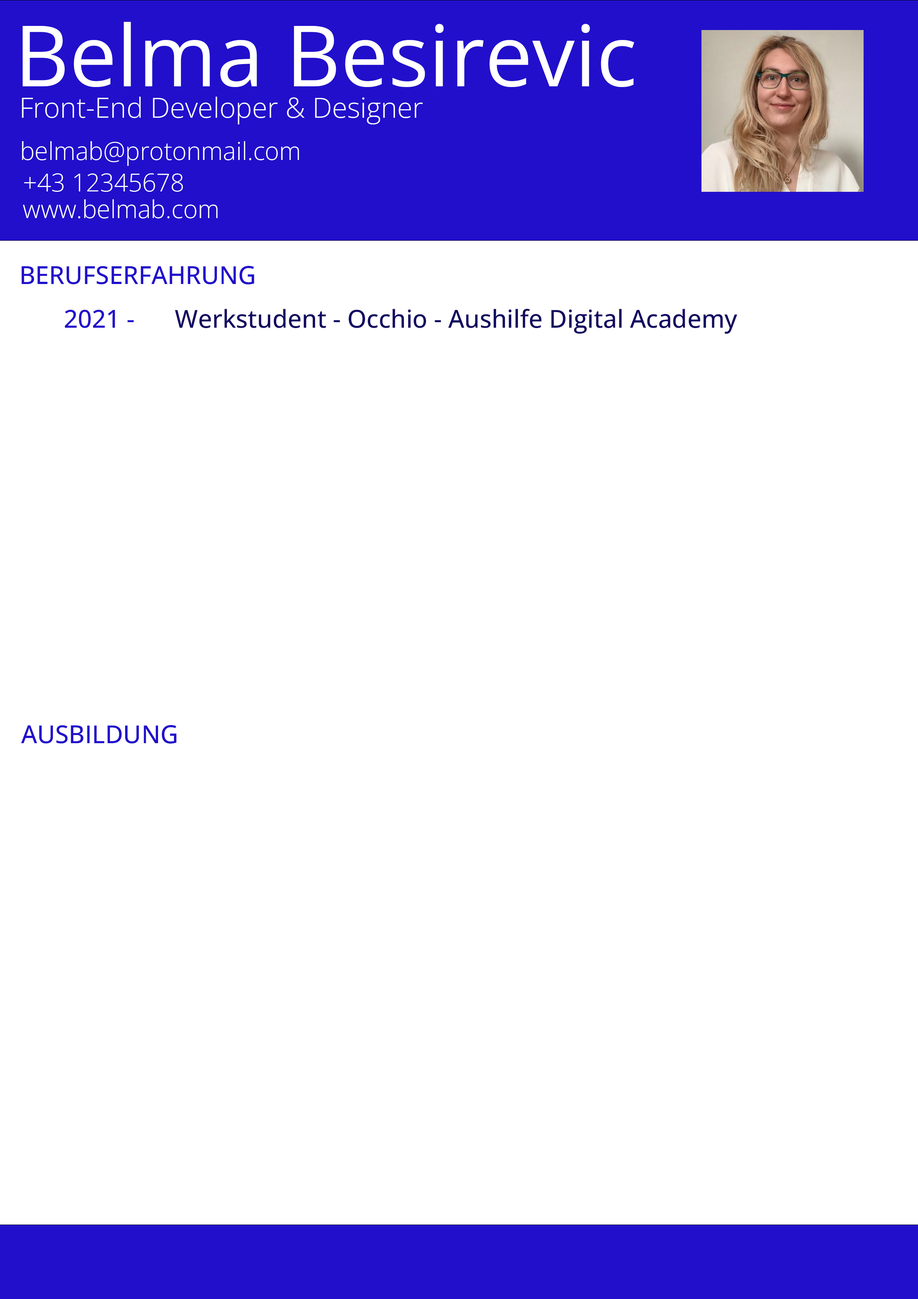
<style>
.page{position:relative;width:918px;height:1299px;background:#ffffff}
.page>*{position:absolute;margin:0}
.t1{font:84.8px "OpenSans-Regular";color:#ffffff}
.t2{font:27.8px "OpenSans-Light";color:#ffffff}
.t3{font:24.7px "OpenSans-Light";color:#ffffff}
.t4{font:24.7px "OpenSans-Medium";color:#210fcb}
.t5{font:24.7px "OpenSans-Medium";color:#110960}
</style>
<div class="page">
<p class="t1" style="left:23px;top:22px;width:612px;height:65px">Belma Besirevic</p>
<p class="t2" style="left:22px;top:97px;width:401px;height:27px">Front-End Developer &amp; Designer</p>
<p class="t3" style="left:22px;top:141px;width:277px;height:25px">belmab@protonmail.com</p>
<p class="t3" style="left:24px;top:173px;width:159px;height:19px">+43 12345678</p>
<p class="t3" style="left:23px;top:199px;width:195px;height:19px">www.belmab.com</p>
<p class="t4" style="left:21px;top:266px;width:233px;height:18px">BERUFSERFAHRUNG</p>
<p class="t4" style="left:65px;top:310px;width:69px;height:18px">2021 -</p>
<p class="t5" style="left:175px;top:309px;width:562px;height:25px">Werkstudent - Occhio - Aushilfe Digital Academy</p>
<p class="t4" style="left:21px;top:725px;width:156px;height:18px">AUSBILDUNG</p>
</div>
